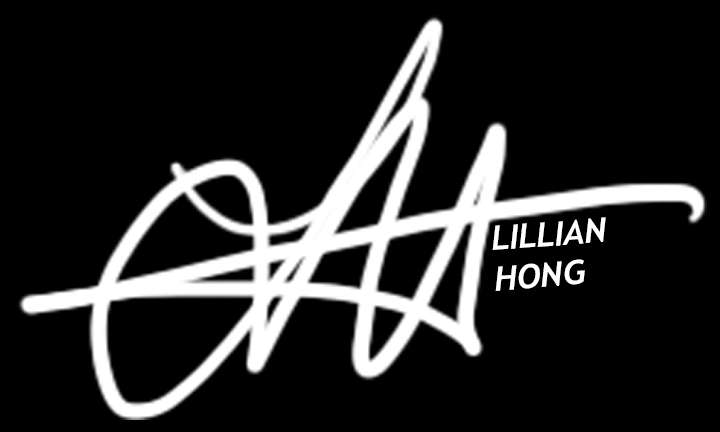
<style>
.page{position:relative;width:720px;height:432px;background:#000000}
.page>*{position:absolute;margin:0}
.t1{font:33.7px "Trebuchet-BoldItalic";color:#ffffff}
</style>
<div class="page">
<p class="t1" style="left:492px;top:217px;width:114px;height:74px;rotate:-4deg">LILLIAN<br>HONG</p>
</div>
